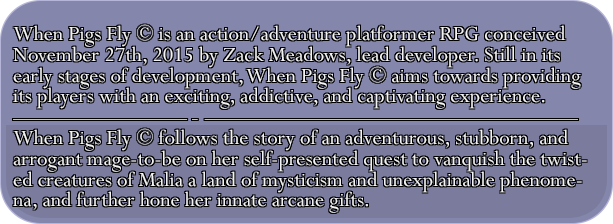
<style>
.page{position:relative;width:613px;height:224px;background:#8486ab}
.page>*{position:absolute;margin:0}
.t1{font:22.6px/20.8px "Perpetua";color:#f3f3f3}
</style>
<div class="page">
<p class="t1" style="left:13px;top:24px;width:574px;height:189px">When Pigs Fly © is an action/adventure platformer RPG conceived November 27th, 2015 by Zack Meadows, lead developer. Still in its early stages of development, When Pigs Fly © aims towards providing its players with an exciting, addictive, and captivating experience. <br><br>When Pigs Fly © follows the story of an adventurous, stubborn, and arrogant mage-to-be on her self-presented quest to vanquish the twisted creatures of Malia a land of mysticism and unexplainable phenomena, and further hone her innate arcane gifts.</p>
</div>
